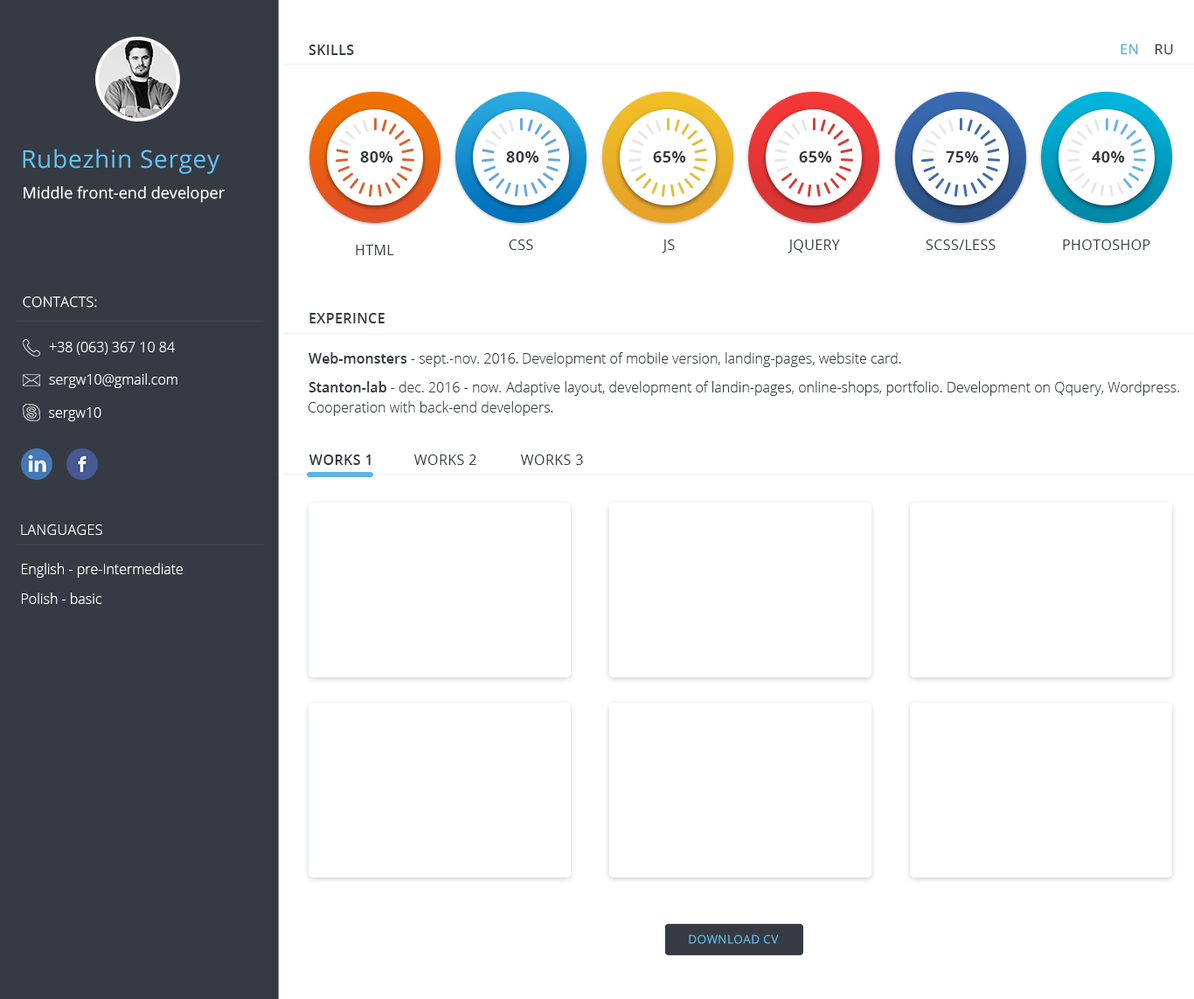
<style>
.page{position:relative;width:1194px;height:999px;background:#ffffff}
.page>*{position:absolute;margin:0}
.t1{font:14px "OpenSans-Semibold";letter-spacing:0.025em;color:#363b43;text-transform:uppercase}
.t2{font:14px "OpenSans";letter-spacing:0.025em;color:#5aadd8;text-transform:uppercase}
.t3{font:14px "OpenSans";letter-spacing:0.025em;color:#363b43;text-transform:uppercase}
.t4{font:24.4px "OpenSans";letter-spacing:0.025em;color:#62c3f5}
.t5{font:15.7px "OpenSans-Bold";letter-spacing:0.025em;color:#363b43;text-transform:uppercase}
.t6{font:15.7px "OpenSans";color:#ffffff}
.t7{font:14px "OpenSans-Light";letter-spacing:0.025em;color:#ffffff;text-transform:uppercase}
.t8{font:14px "OpenSans-Light";color:#ffffff}
.t9{font:14px "OpenSans-Light";color:#363b43}
.t10{font:14px "OpenSans-Semibold";color:#363b43}
.t11{font:11.9px "OpenSans";letter-spacing:0.025em;color:#62c3f5;text-transform:uppercase}
</style>
<div class="page">
<p class="t1" style="left:308px;top:45px;width:46px;height:10px">Skills</p>
<p class="t2" style="left:1120px;top:44px;width:18px;height:11px">EN</p>
<p class="t3" style="left:1154px;top:44px;width:19px;height:11px">RU</p>
<p class="t4" style="left:23px;top:149px;width:196px;height:25px">Rubezhin Sergey</p>
<p class="t5" style="left:360px;top:151px;width:33px;height:12px">80%</p>
<p class="t5" style="left:506px;top:151px;width:33px;height:12px">80%</p>
<p class="t5" style="left:653px;top:151px;width:33px;height:12px">65%</p>
<p class="t5" style="left:799px;top:151px;width:33px;height:12px">65%</p>
<p class="t5" style="left:946px;top:151px;width:33px;height:12px">75%</p>
<p class="t5" style="left:1092px;top:151px;width:33px;height:12px">40%</p>
<p class="t6" style="left:24px;top:186px;width:201px;height:17px">Middle front-end developer</p>
<p class="t3" style="left:356px;top:245px;width:38px;height:10px">HTML</p>
<p class="t3" style="left:509px;top:239px;width:24px;height:11px">CSS</p>
<p class="t3" style="left:662px;top:239px;width:13px;height:14px">JS</p>
<p class="t3" style="left:787px;top:239px;width:53px;height:14px">JQuery</p>
<p class="t3" style="left:925px;top:239px;width:70px;height:11px">SCSS/less</p>
<p class="t3" style="left:1063px;top:239px;width:87px;height:11px">Photoshop</p>
<p class="t7" style="left:23px;top:296px;width:74px;height:12px">Contacts:</p>
<p class="t1" style="left:309px;top:313px;width:76px;height:10px">Experince</p>
<p class="t8" style="left:49px;top:342px;width:126px;height:13px">+38 (063) 367 10 84</p>
<p class="t9" style="left:308px;top:352px;width:210px;height:15px"><span class="t10">Web-monsters </span>- sept.-nov. 2016.</p>
<p class="t9" style="left:523px;top:352px;width:378px;height:15px">Development of mobile version, landing-pages, website card.</p>
<p class="t8" style="left:49px;top:373px;width:128px;height:15px">sergw10@gmail.com</p>
<p class="t9" style="left:308px;top:381px;width:193px;height:11px"><span class="t10">Stanton-lab</span> - dec. 2016 - now.</p>
<p class="t9" style="left:506px;top:381px;width:673px;height:15px">Adaptive layout, development of landin-pages, online-shops, portfolio. Development on Qquery, Wordpress.</p>
<p class="t9" style="left:308px;top:401px;width:245px;height:15px">Cooperation with back-end developers.</p>
<p class="t8" style="left:49px;top:407px;width:52px;height:14px">sergw10</p>
<p class="t1" style="left:308px;top:454px;width:63px;height:11px">Works 1</p>
<p class="t3" style="left:414px;top:454px;width:62px;height:11px">Works 2</p>
<p class="t3" style="left:521px;top:454px;width:62px;height:11px">Works 3</p>
<p class="t7" style="left:21px;top:524px;width:81px;height:11px">Languages</p>
<p class="t8" style="left:22px;top:563px;width:161px;height:15px">English - pre-Intermediate</p>
<p class="t8" style="left:22px;top:593px;width:80px;height:11px">Polish - basic</p>
<p class="t11" style="left:689px;top:934px;width:90px;height:10px">download cv</p>
</div>
